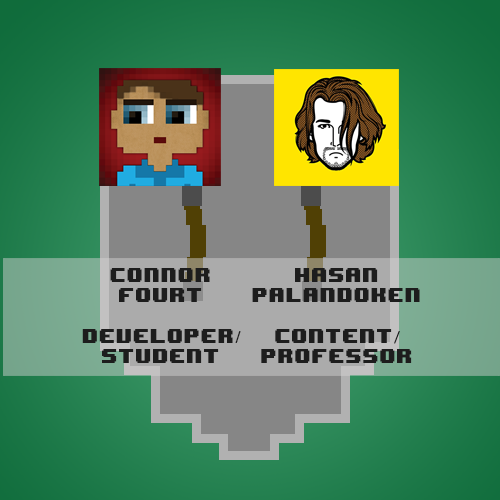
<style>
.page{position:relative;width:500px;height:500px}
.page>*{position:absolute;margin:0}
.t1{font:16.9px "8BITWONDERNominal";color:#1d1d1d}
.t2{font:16.9px "Helvetica";color:#1d1d1d}
.t3{font:16.9px "MyriadPro-Regular";color:#1d1d1d}
</style>
<div class="page">
<p class="t1" style="left:82px;top:268px;width:159px;height:95px;text-align:center">Connor Fourt<br><br>Developer<span class="t2">/</span><br>Student</p>
<p class="t1" style="left:252px;top:268px;width:168px;height:95px;text-align:center">Hasan<br>Palandoken<br><br>Content<span class="t3">/<br></span>Professor</p>
</div>
